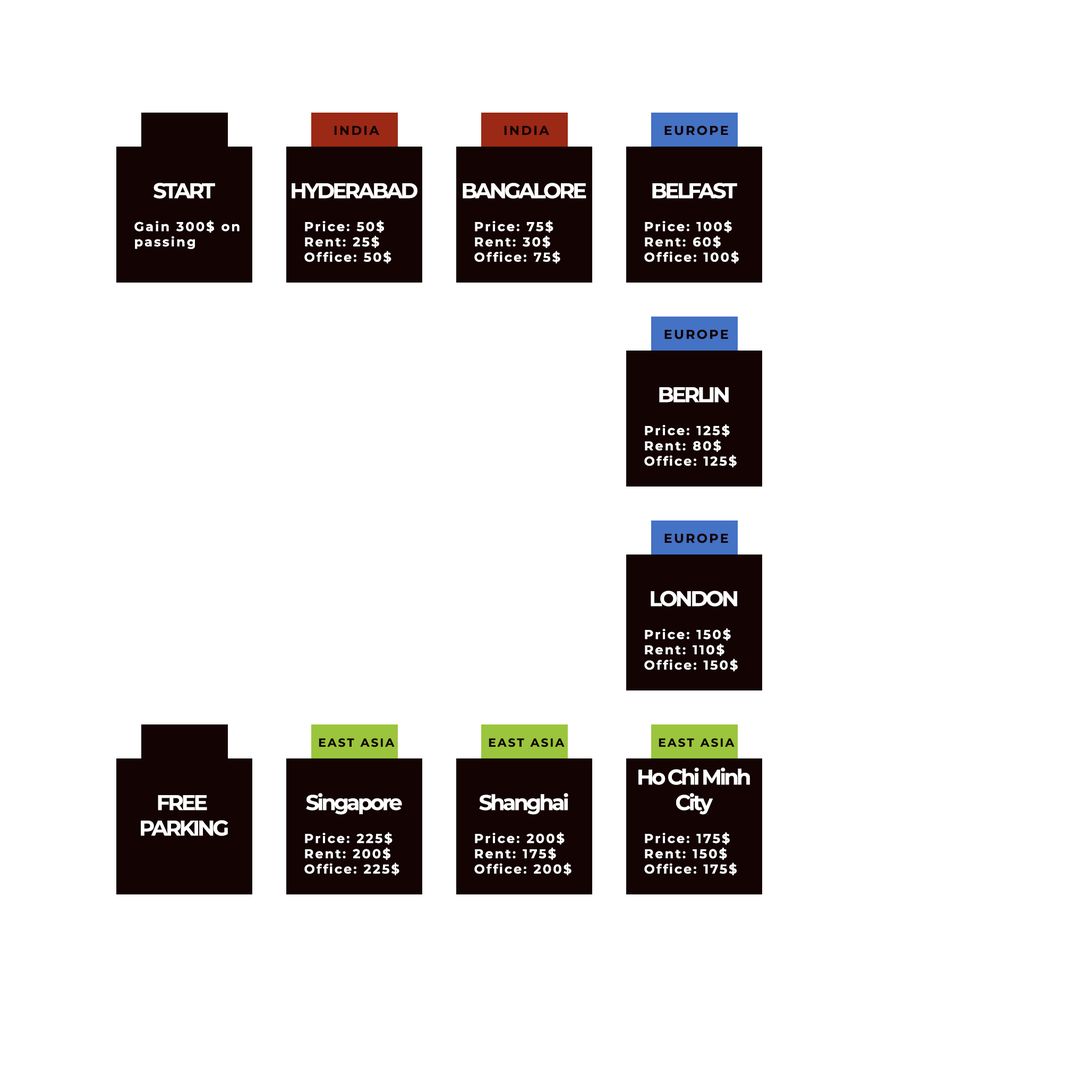
<style>
.page{position:relative;width:1092px;height:1092px;background:#ffffff}
.page>*{position:absolute;margin:0}
.t1{font:12.7px "Montserrat-Bold";letter-spacing:0.13em;color:#130303}
.t2{font:21.2px "Montserrat-Bold";letter-spacing:-0.1em;color:#ffffff}
.t3{font:12.7px "Montserrat-Bold";letter-spacing:0.13em;color:#ffffff}
.t4{font:11.7px "Montserrat-Bold";letter-spacing:0.13em;color:#130303}
</style>
<div class="page">
<p class="t1" style="left:334px;top:126px;width:45px;height:9px">INDIA</p>
<p class="t1" style="left:504px;top:126px;width:45px;height:9px">INDIA</p>
<p class="t1" style="left:664px;top:125px;width:64px;height:10px">EUROPE</p>
<p class="t2" style="left:153px;top:183px;width:62px;height:16px">START</p>
<p class="t2" style="left:292px;top:183px;width:125px;height:16px">HYDERABAD</p>
<p class="t2" style="left:463px;top:183px;width:123px;height:16px">BANGALORE</p>
<p class="t2" style="left:652px;top:183px;width:85px;height:16px">BELFAST</p>
<p class="t3" style="left:134px;top:220px;width:106px;height:29px">Gain 300$ on<br>passing</p>
<p class="t3" style="left:304px;top:220px;width:87px;height:43px">Price: 50$<br>Rent: 25$<br>Office: 50$</p>
<p class="t3" style="left:474px;top:220px;width:86px;height:43px">Price: 75$<br>Rent: 30$<br>Office: 75$</p>
<p class="t3" style="left:644px;top:220px;width:95px;height:43px">Price: 100$<br>Rent: 60$<br>Office: 100$</p>
<p class="t1" style="left:664px;top:329px;width:64px;height:10px">EUROPE</p>
<p class="t2" style="left:659px;top:387px;width:70px;height:16px">BERLIN</p>
<p class="t3" style="left:644px;top:424px;width:93px;height:43px">Price: 125$<br>Rent: 80$<br>Office: 125$</p>
<p class="t1" style="left:664px;top:533px;width:64px;height:10px">EUROPE</p>
<p class="t2" style="left:651px;top:591px;width:86px;height:16px">LONDON</p>
<p class="t3" style="left:644px;top:628px;width:94px;height:43px">Price: 150$<br>Rent: 110$<br>Office: 150$</p>
<p class="t4" style="left:319px;top:738px;width:76px;height:9px">EAST ASIA</p>
<p class="t4" style="left:489px;top:738px;width:76px;height:9px">EAST ASIA</p>
<p class="t4" style="left:659px;top:738px;width:76px;height:9px">EAST ASIA</p>
<p class="t2" style="left:638px;top:767px;width:112px;height:48px;text-align:center">Ho Chi Minh<br>City</p>
<p class="t2" style="left:141px;top:795px;width:87px;height:41px;text-align:center">FREE <br>PARKING</p>
<p class="t2" style="left:306px;top:793px;width:96px;height:22px">Singapore</p>
<p class="t2" style="left:479px;top:793px;width:89px;height:22px">Shanghai</p>
<p class="t3" style="left:304px;top:832px;width:95px;height:43px">Price: 225$<br>Rent: 200$<br>Office: 225$</p>
<p class="t3" style="left:474px;top:832px;width:97px;height:43px">Price: 200$<br>Rent: 175$<br>Office: 200$</p>
<p class="t3" style="left:644px;top:832px;width:93px;height:43px">Price: 175$<br>Rent: 150$<br>Office: 175$</p>
</div>
